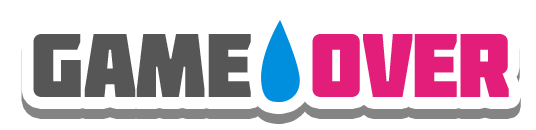
<style>
.page{position:relative;width:536px;height:130px;background:#ffffff}
.page>*{position:absolute;margin:0}
.t1{font:90px "Molot";letter-spacing:-0.02em;color:#e21d7a}
.t2{font:90px "Molot";letter-spacing:-0.02em;color:#565656}
.t3{font:90px "Molot";letter-spacing:0.16em;color:#565656}
</style>
<div class="page">
<p class="t1" style="left:33px;top:34px;width:476px;height:63px"><span class="t2">GAM</span><span class="t3">E </span>OVER</p>
<p class="t1" style="left:33px;top:44px;width:476px;height:63px"><span class="t2">GAM</span><span class="t3">E </span>OVER</p>
</div>
